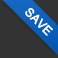
<style>
.page{position:relative;width:58px;height:58px;background:#333333}
.page>*{position:absolute;margin:0}
.t1{font:12px "ArialMT";color:#ffffff;font-weight:bold}
</style>
<div class="page">
<p class="t1" style="left:25px;top:8px;width:28px;height:28px;rotate:45deg">SAVE</p>
</div>
